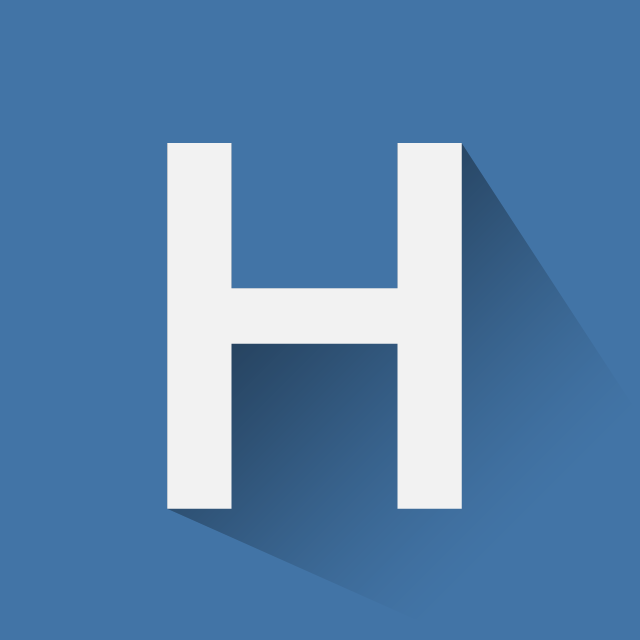
<style>
.page{position:relative;width:640px;height:640px;background:#4274a6}
.page>*{position:absolute;margin:0}
.t1{font:512px "HelveticaNeue-Medium";color:#f2f2f2}
</style>
<div class="page">
<p class="t1" style="left:167px;top:143px;width:295px;height:366px">H</p>
</div>
